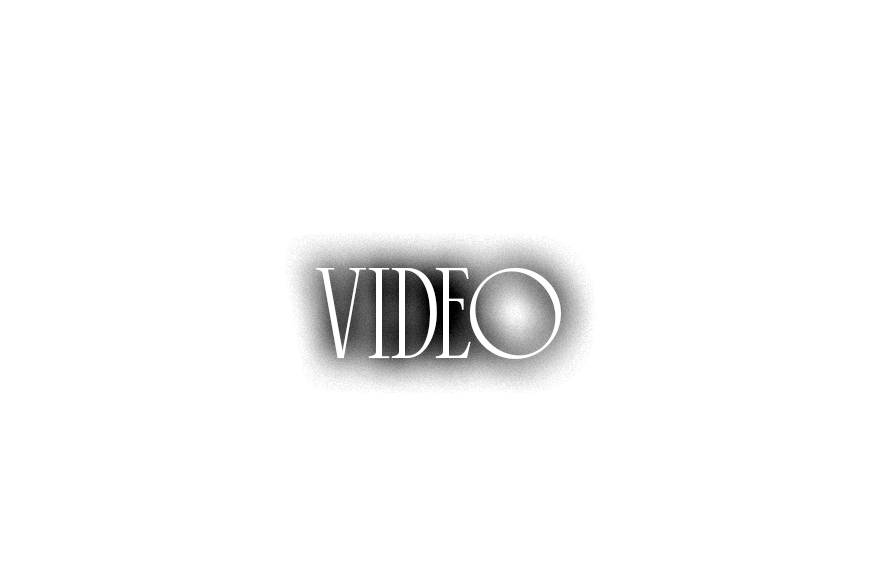
<style>
.page{position:relative;width:886px;height:580px;background:#ffffff}
.page>*{position:absolute;margin:0}
.t1{font:125px "Cyrano-DEMO";color:#ffffff}
</style>
<div class="page">
<p class="t1" style="left:315px;top:267px;width:246px;height:92px">video</p>
</div>
